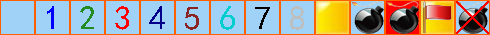
<style>
.page{position:relative;width:490px;height:35px;background:#a0d2f8}
.page>*{position:absolute;margin:0}
.t1{font:34.4px "SimHei";color:#0000ff}
.t2{font:34.4px "SimHei";color:#228b22}
.t3{font:34.4px "SimHei";color:#ff0000}
.t4{font:34.4px "SimHei";color:#00008b}
.t5{font:34.4px "SimHei";color:#00cdcd}
.t6{font:34.4px "SimHei";color:#bebebe}
.t7{font:34.4px "SimHei";color:#8b2323}
.t8{font:34.4px "SimHei";color:#000000}
</style>
<div class="page">
<p class="t1" style="left:47px;top:6px;width:7px;height:23px">1</p>
<p class="t2" style="left:80px;top:6px;width:14px;height:23px">2</p>
<p class="t3" style="left:115px;top:6px;width:14px;height:24px">3</p>
<p class="t4" style="left:149px;top:6px;width:16px;height:23px">4</p>
<p class="t5" style="left:220px;top:6px;width:15px;height:24px">6</p>
<p class="t6" style="left:290px;top:6px;width:14px;height:24px">8</p>
<p class="t7" style="left:185px;top:7px;width:14px;height:23px">5</p>
<p class="t8" style="left:255px;top:7px;width:15px;height:22px">7</p>
</div>
